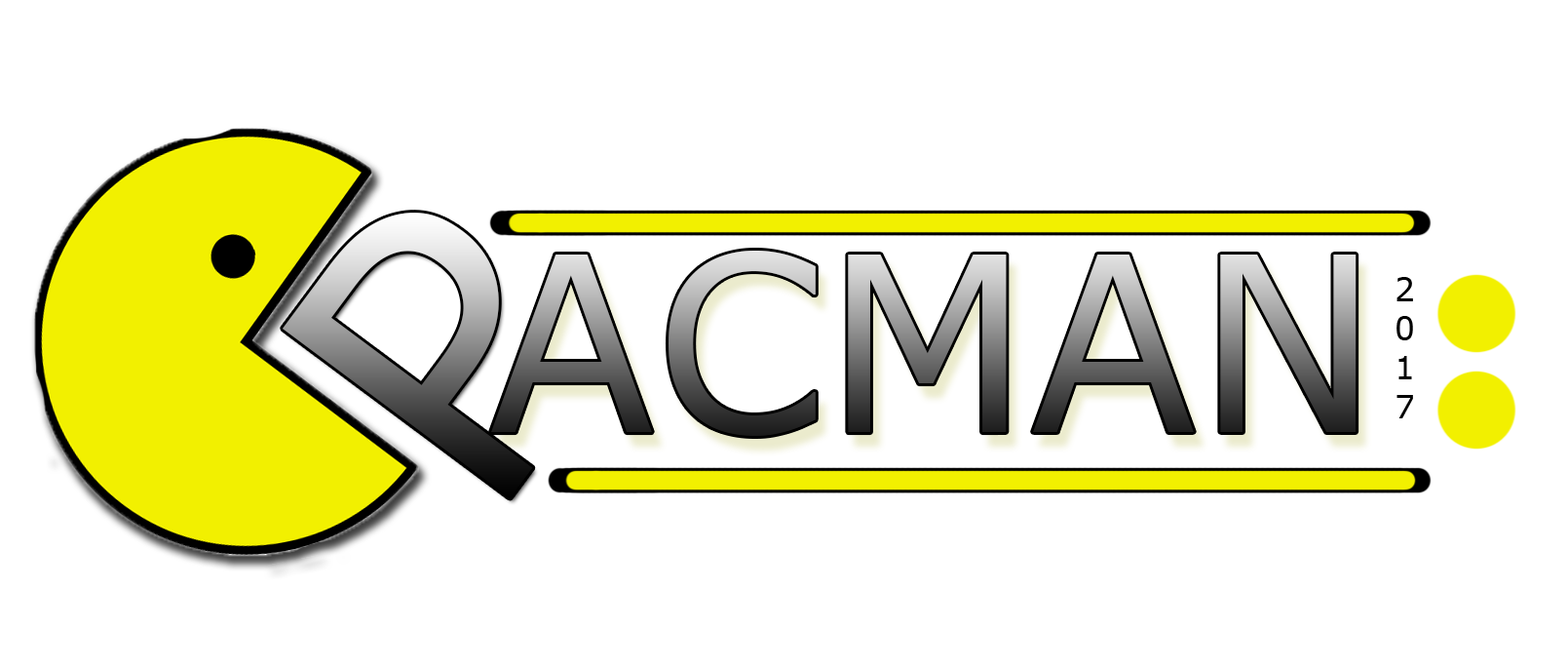
<style>
.page{position:relative;width:1568px;height:668px;background:#ffffff}
.page>*{position:absolute;margin:0}
.t1{font:243.6px "Verdana"}
.t2{font:32.5px "Verdana";color:#000000}
</style>
<div class="page">
<p class="t1" style="left:491px;top:250px;width:866px;height:186px">ACMAN</p>
<p class="t2" style="left:1396px;top:277px;width:17px;height:141px">2<br>0<br>1<br>7</p>
</div>
